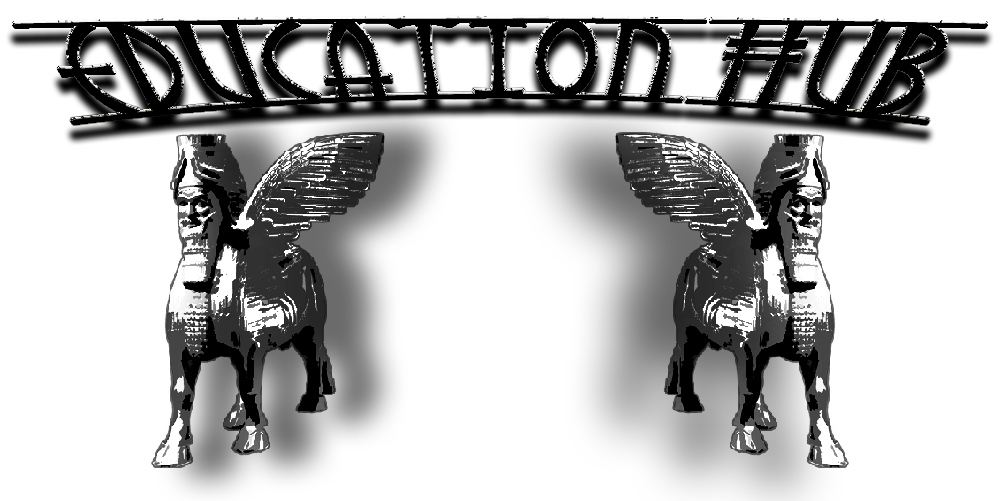
<style>
.page{position:relative;width:1000px;height:501px;background:#ffffff}
.page>*{position:absolute;margin:0}
.t1{font:151.7px "AngarsRunesPERSONALUSEONLY";color:#000000;scale:1.53 1}
</style>
<div class="page">
<p class="t1" style="left:13px;top:18px;width:974px;height:105px">Education Hub</p>
</div>
